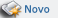
<style>
.page{position:relative;width:58px;height:18px;background:#eff0f1}
.page>*{position:absolute;margin:0}
.t1{font:10px "Verdana";color:#336ca1}
</style>
<div class="page">
<p class="t1" style="left:25px;top:5px;width:25px;height:8px">Novo</p>
</div>
